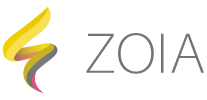
<style>
.page{position:relative;width:207px;height:100px;background:#ffffff}
.page>*{position:absolute;margin:0}
.t1{font:56.2px "Aileron-Thin";color:#747477}
</style>
<div class="page">
<p class="t1" style="left:86px;top:33px;width:118px;height:41px">ZOIA</p>
</div>
